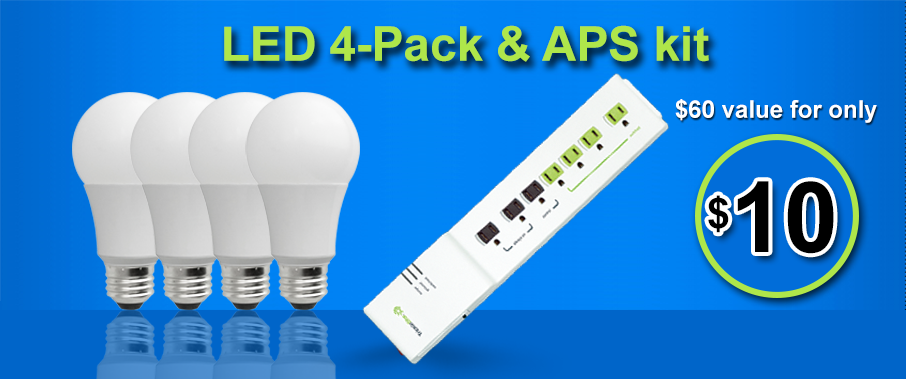
<style>
.page{position:relative;width:906px;height:379px}
.page>*{position:absolute;margin:0}
.t1{font:48px "Arial-BoldMT";letter-spacing:-0.005em;color:#afe64a}
.t2{font:24.3px "Arial-BoldMT";letter-spacing:-0.005em;color:#ffffff}
.t3{font:98.2px "Arial-BoldMT";letter-spacing:-0.005em;color:#000000}
.t4{font:72px "Arial-BoldMT";letter-spacing:-0.005em;color:#000000}
</style>
<div class="page">
<p class="t1" style="left:224px;top:25px;width:485px;height:37px">LED 4-Pack &amp; APS kit</p>
<p class="t2" style="left:675px;top:99px;width:202px;height:24px">$60 value for only</p>
<p class="t3" style="left:708px;top:181px;width:126px;height:73px"><span class="t4">$</span>10</p>
</div>
